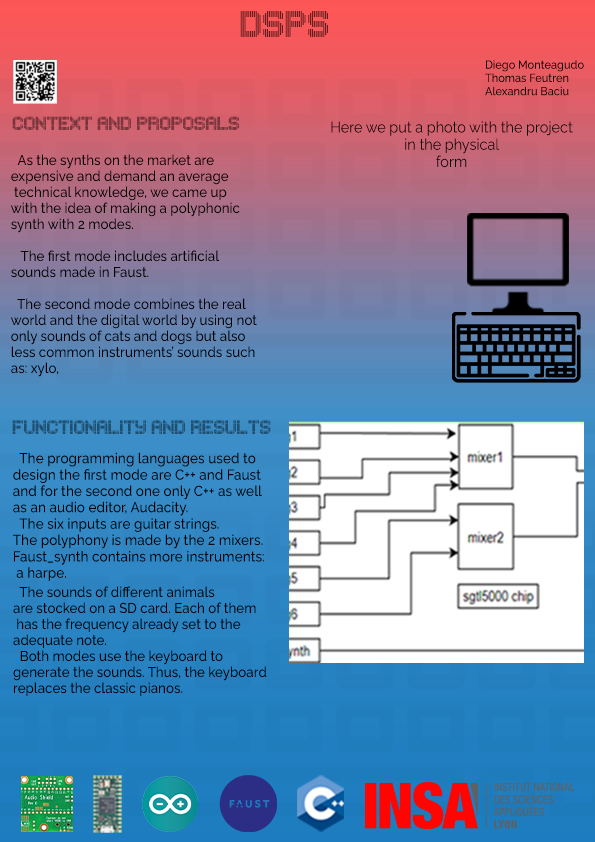
<style>
.page{position:relative;width:595px;height:842px}
.page>*{position:absolute;margin:0}
.t1{font:32.1px "MUSICNET";scale:0.93 1}
.t2{font:11.8px "Raleway-Medium";color:#000000;scale:0.93 1}
.t3{font:16.4px "MUSICNET";scale:0.93 1}
.t4{font:15.4px "Raleway-Regular";color:#000000;scale:0.93 1}
.t5{font:14.3px "Raleway-Medium";color:#000000;scale:0.93 1}
.t6{font:16.4px "MUSICNET";color:#000000;scale:0.93 1}
.t7{font:14.6px "Raleway-Medium";color:#000000;scale:0.93 1}
</style>
<div class="page">
<p class="t1" style="left:240px;top:11px;width:88px;height:26px">DSPS</p>
<p class="t2" style="left:485px;top:60px;width:99px;height:36px">Diego Monteagudo<br>Thomas Feutren  <br>Alexandru Baciu</p>
<p class="t3" style="left:12px;top:116px;width:227px;height:14px">CONTEXT AND PROPOSALS</p>
<p class="t4" style="left:331px;top:121px;width:242px;height:47px;text-align:center">Here we put a photo with the project <br>in the physical<br>form</p>
<p class="t5" style="left:11px;top:154px;width:246px;height:223px"><span class="t6"><br><br>  </span>As the synths on the market are <br>expensive and demand an average<br> technical knowledge, we came up <br>with the idea of making a polyphonic<br>synth with 2 modes. <br>  <br>   The first mode includes artificial <br>sounds made in Faust. <br>  <br>  The second mode combines the real <br>world and the digital world by using not <br>only sounds of cats and dogs but also <br>less common instruments’ sounds such <br>as: xylo,</p>
<p class="t3" style="left:12px;top:420px;width:259px;height:14px">FUNCTIONALITY AND RESULTS</p>
<p class="t7" style="left:13px;top:452px;width:251px;height:129px">The programming languages used to<br>design the first mode are C++ and Faust <br>and for the second one only C++ as well <br>as an audio editor, Audacity.<br>  The six inputs are guitar strings.<br>The polyphony is made by the 2 mixers. <br>Faust_synth contains more instruments:<br> a harpe.</p>
<p class="t5" style="left:13px;top:586px;width:254px;height:110px">The sounds of different animals <br>are stocked on a SD card. Each of them<br> has the frequency already set to the <br>adequate note.<br>  Both modes use the keyboard to <br>generate the sounds. Thus, the keyboard<br>replaces the classic pianos.</p>
</div>
